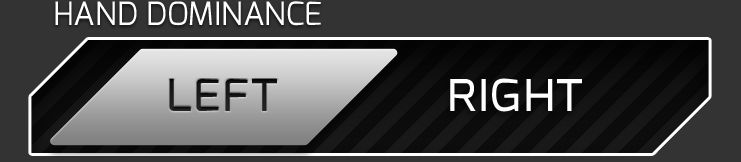
<style>
.page{position:relative;width:741px;height:162px;background:#333333}
.page>*{position:absolute;margin:0}
.t1{font:32px "Exo-Regular";color:#ffffff;text-transform:uppercase}
.t2{font:56px "Exo-Regular";color:#ffffff;font-variant:small-caps}
.t3{font:56px "Exo-Regular";color:#000000;font-variant:small-caps}
</style>
<div class="page">
<p class="t1" style="left:55px;top:1px;width:266px;height:25px">Hand Dominance</p>
<p class="t2" style="left:450px;top:78px;width:132px;height:34px">right</p>
<p class="t3" style="left:169px;top:79px;width:108px;height:32px">left</p>
</div>
